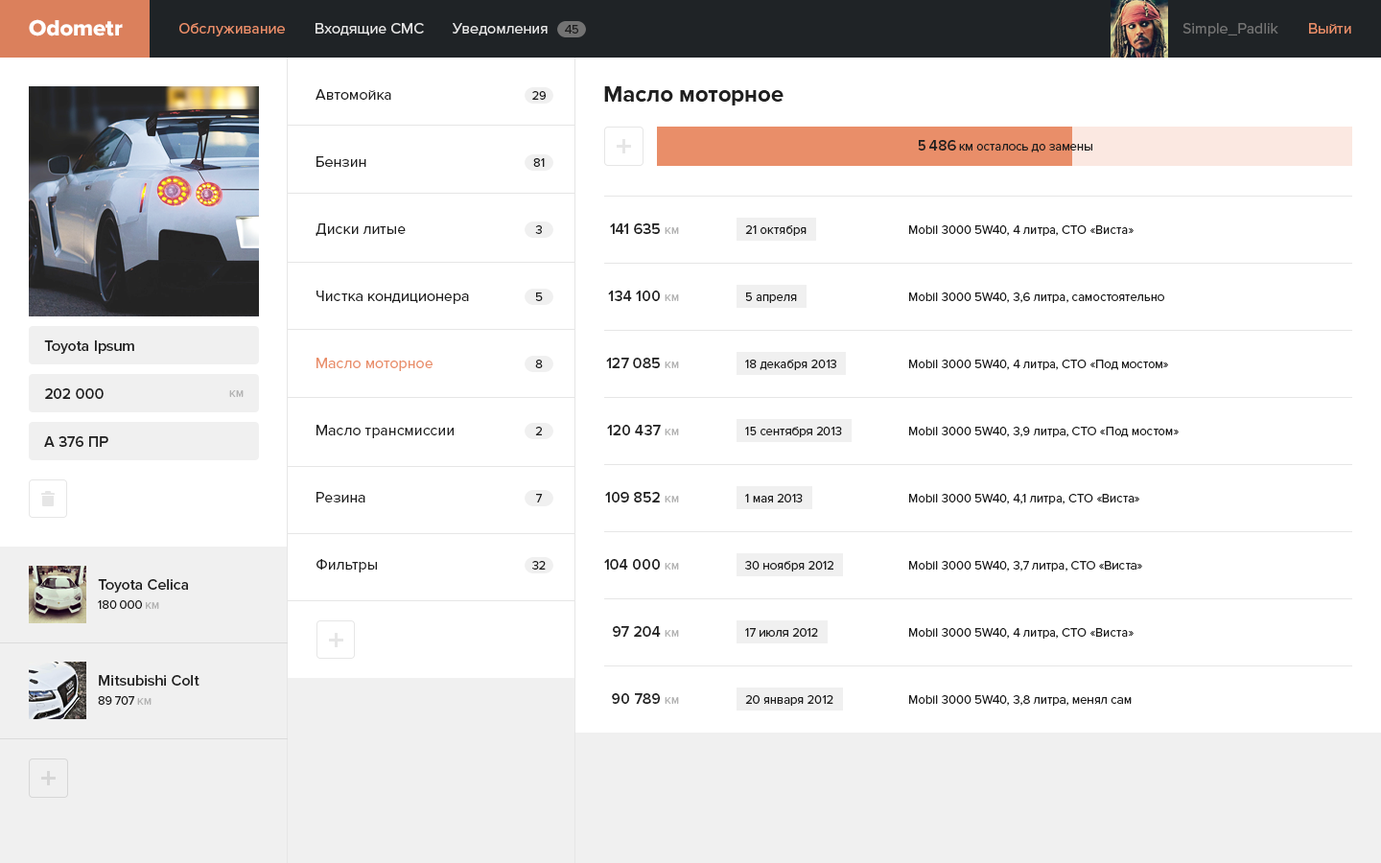
<style>
.page{position:relative;width:1381px;height:863px;background:#ffffff}
.page>*{position:absolute;margin:0}
.t1{font:23px "ProximaNova-Extrabld";color:#ffffff}
.t2{font:15.3px "ProximaNova-Regular";color:#e98e69}
.t3{font:15.3px "ProximaNova-Regular";color:#e6e6e6}
.t4{font:12.5px "ProximaNova-Regular";color:#1f1f1f}
.t5{font:15.3px "ProximaNova-Regular";color:#737373}
.t6{font:15.3px/67.1px "ProximaNova-Regular";color:#1f1f1f}
.t7{font:15.3px/67.1px "ProximaNova-Regular";color:#e98e69}
.t8{font:23px "ProximaNova-Bold";color:#1f1f1f}
.t9{font:12.5px/67.1px "ProximaNova-Regular";color:#1f1f1f}
.t10{font:15.3px "ProximaNova-Semibold";color:#1f1f1f}
.t11{font:15.3px/67.1px "ProximaNova-Semibold";color:#1f1f1f}
.t12{font:12.5px/19.2px "ProximaNova-Regular";color:#b3b3b3}
.t13{font:12.5px "ProximaNova-Regular";color:#b3b3b3}
.t14{font:15.3px/19.2px "ProximaNova-Semibold";color:#1f1f1f}
.t15{font:12.5px/19.2px "ProximaNova-Regular";color:#1f1f1f}
</style>
<div class="page">
<p class="t1" style="left:29px;top:19px;width:94px;height:17px">Odometr</p>
<p class="t2" style="left:179px;top:23px;width:106px;height:13px">Обслуживание</p>
<p class="t3" style="left:316px;top:23px;width:108px;height:12px">Входящие СМС</p>
<p class="t3" style="left:453px;top:23px;width:95px;height:12px">Уведомления</p>
<p class="t4" style="left:565px;top:25px;width:13px;height:9px">45</p>
<p class="t5" style="left:1183px;top:23px;width:96px;height:13px">Simple_Padlik</p>
<p class="t2" style="left:1309px;top:23px;width:43px;height:11px">Выйти</p>
<p class="t6" style="left:316px;top:89px;width:153px;height:484px">Автомойка<br>Бензин<br>Диски литые<br>Чистка кондиционера<br><span class="t7">Масло моторное<br></span>Масло трансмиссии<br>Резина<br>Фильтры</p>
<p class="t8" style="left:604px;top:86px;width:180px;height:20px">Масло моторное</p>
<p class="t9" style="left:532px;top:91px;width:14px;height:479px;text-align:center">29<br>81<br>3<br>5<br>8<br>2<br>7<br>32</p>
<p class="t4" style="left:918px;top:140px;width:175px;height:13px"><span class="t10">5 486 </span>км осталось до замены</p>
<p class="t11" style="left:604px;top:223px;width:75px;height:481px;text-align:right">141 635 <span class="t12">км<br></span>134 100 <span class="t12">км<br></span>127 085 <span class="t12">км<br></span>120 437 <span class="t12">км<br></span>109 852 <span class="t12">км<br></span>104 000 <span class="t12">км<br></span>97 204 <span class="t12">км<br></span>90 789 <span class="t12">км</span></p>
<p class="t9" style="left:745px;top:225px;width:97px;height:481px">21 октября<br>5 апреля <br>18 декабря 2013<br>15 сентября 2013<br>1 мая 2013<br>30 ноября 2012<br>17 июля 2012<br>20 января 2012</p>
<p class="t9" style="left:909px;top:225px;width:270px;height:481px">Mobil 3000 5W40, 4 литра, СТО «Виста»<br>Mobil 3000 5W40, 3,6 литра, самостоятельно<br>Mobil 3000 5W40, 4 литра, СТО «Под мостом»<br>Mobil 3000 5W40, 3,9 литра, СТО «Под мостом»<br>Mobil 3000 5W40, 4,1 литра, СТО «Виста»<br>Mobil 3000 5W40, 3,7 литра, СТО «Виста»<br>Mobil 3000 5W40, 4 литра, СТО «Виста»<br>Mobil 3000 5W40, 3,8 литра, менял сам</p>
<p class="t10" style="left:44px;top:341px;width:90px;height:13px">Toyota Ipsum</p>
<p class="t10" style="left:45px;top:388px;width:59px;height:11px">202 000</p>
<p class="t13" style="left:229px;top:390px;width:15px;height:7px">км</p>
<p class="t10" style="left:44px;top:436px;width:64px;height:11px">А 376 ПР</p>
<p class="t14" style="left:98px;top:579px;width:90px;height:30px">Toyota Celica<br><span class="t15">180 000 </span><span class="t12">км</span></p>
<p class="t14" style="left:98px;top:675px;width:102px;height:30px">Mitsubishi Colt<br><span class="t15">89 707 </span><span class="t12">км</span></p>
</div>
